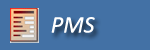
<style>
.page{position:relative;width:150px;height:50px;background:#4371a5}
.page>*{position:absolute;margin:0}
.t1{font:24px "Calibri-Italic";color:#ffffff}
</style>
<div class="page">
<p class="t1" style="left:51px;top:17px;width:44px;height:16px">PMS</p>
</div>
